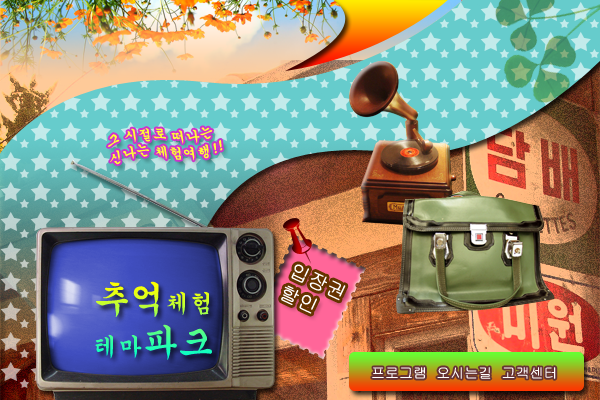
<style>
.page{position:relative;width:600px;height:400px}
.page>*{position:absolute;margin:0}
.t1{font:14px "Gungsuh";color:#ffff33}
.t2{font:20px "Gulim";color:#ffffff}
.t3{font:24px "Gungsuh"}
.t4{font:36px "Gungsuh"}
.t5{font:14px "Gulim";color:#ffffff}
</style>
<div class="page">
<p class="t1" style="left:107px;top:127px;width:116px;height:38px;rotate:-9deg">그 시절로 떠나는<br>신나는 체험여행!!</p>
<p class="t2" style="left:281px;top:264px;width:65px;height:50px;rotate:25deg">입장권<br>할인</p>
<p class="t3" style="left:95px;top:281px;width:117px;height:79px"><span class="t4">추억</span>체험<br>테마<span class="t4">파크</span></p>
<p class="t5" style="left:372px;top:367px;width:184px;height:12px">프로그램  오시는길  고객센터</p>
</div>
